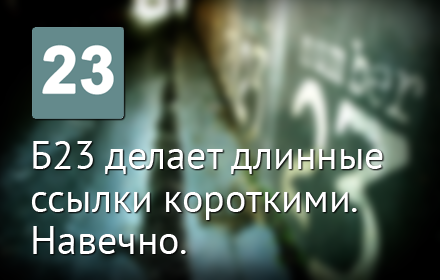
<style>
.page{position:relative;width:440px;height:280px}
.page>*{position:absolute;margin:0}
.t1{font:40px/42.7px "PTSans-Regular";color:#ffffff}
</style>
<div class="page">
<p class="t1" style="left:31px;top:141px;width:352px;height:113px">Б23 делает длинные<br>ссылки короткими. <br>Навечно.</p>
</div>
